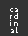
<style>
.page{position:relative;width:28px;height:36px;background:#333333}
.page>*{position:absolute;margin:0}
.t1{font:8px/7px "PTSans-Caption";letter-spacing:0.145em;color:#ffffff}
</style>
<div class="page">
<p class="t1" style="left:10px;top:8px;width:8px;height:25px;text-align:center">ca<br>rd<br>in<br>al</p>
</div>
